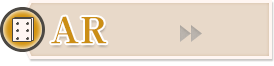
<style>
.page{position:relative;width:274px;height:66px;background:#e8d9c9}
.page>*{position:absolute;margin:0}
.t1{font:36px "RyuminPro-ExBold";color:#cb8e15}
</style>
<div class="page">
<p class="t1" style="left:51px;top:16px;width:56px;height:28px">AR</p>
</div>
